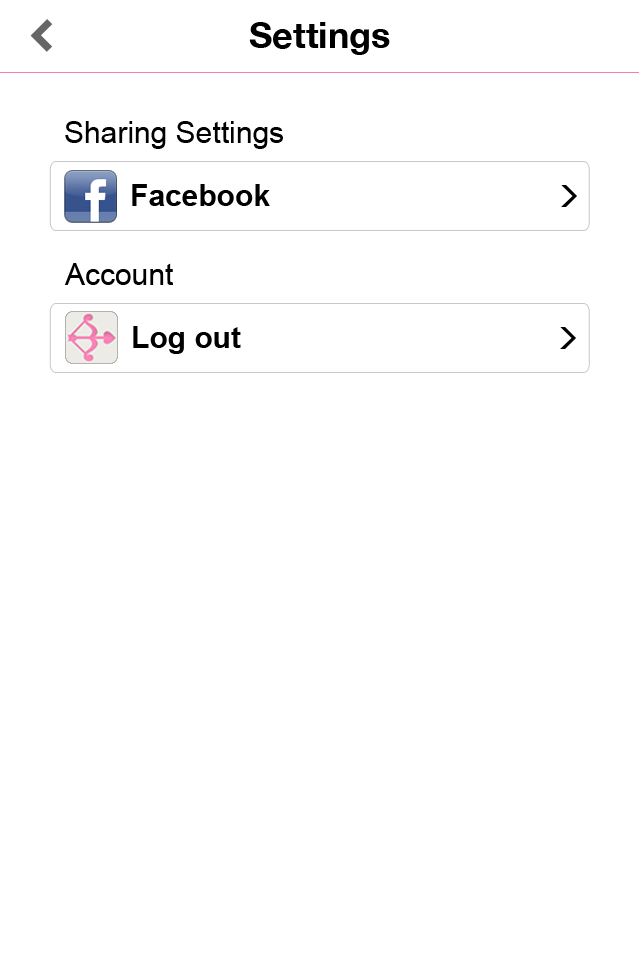
<style>
.page{position:relative;width:640px;height:960px;background:#ffffff}
.page>*{position:absolute;margin:0}
.t1{font:36px "HelveticaNeue-Bold";color:#000000}
.t2{font:30px "ArialMT";color:#000000}
.t3{font:30px "Arial-BoldMT";color:#000000}
</style>
<div class="page">
<p class="t1" style="left:249px;top:22px;width:141px;height:33px">Settings</p>
<p class="t2" style="left:65px;top:121px;width:218px;height:28px">Sharing Settings</p>
<p class="t3" style="left:132px;top:184px;width:138px;height:22px">Facebook</p>
<p class="t2" style="left:64px;top:263px;width:109px;height:22px">Account</p>
<p class="t3" style="left:133px;top:326px;width:108px;height:28px">Log out</p>
</div>
